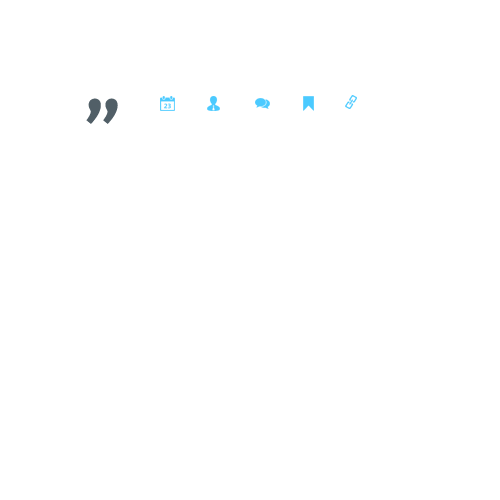
<style>
.page{position:relative;width:500px;height:500px;background:#ffffff}
.page>*{position:absolute;margin:0}
.t1{font:72px "Bitter-Bold";color:#515f67}
</style>
<div class="page">
<p class="t1" style="left:86px;top:98px;width:32px;height:26px">”</p>
</div>
